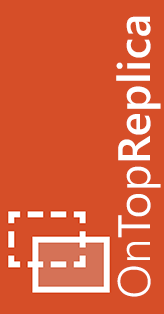
<style>
.page{position:relative;width:164px;height:314px;background:#d64e28}
.page>*{position:absolute;margin:0}
.t1{font:45.5px "SegoeUI-Semibold";letter-spacing:0.01em;color:#ffffff}
.t2{font:45.5px "SegoeUI-Semilight";letter-spacing:0.01em;color:#ffffff}
.t3{font:45.5px "SegoeUI";letter-spacing:0.01em;color:#ffffff}
</style>
<div class="page">
<p class="t1" style="left:116px;top:16px;width:45px;height:281px;rotate:-90deg"><span class="t2">On</span><span class="t3">Top</span>Replica</p>
</div>
